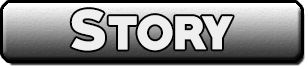
<style>
.page{position:relative;width:308px;height:69px}
.page>*{position:absolute;margin:0}
.t1{font:50px "PRIMETIME-Regular";color:#efefef}
</style>
<div class="page">
<p class="t1" style="left:71px;top:9px;width:162px;height:42px">Story</p>
</div>
